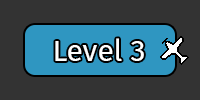
<style>
.page{position:relative;width:200px;height:100px;background:#333333}
.page>*{position:absolute;margin:0}
.t1{font:30px "FiraSans-Regular";color:#ffffff}
</style>
<div class="page">
<p class="t1" style="left:55px;top:38px;width:89px;height:23px">Level 3</p>
</div>
